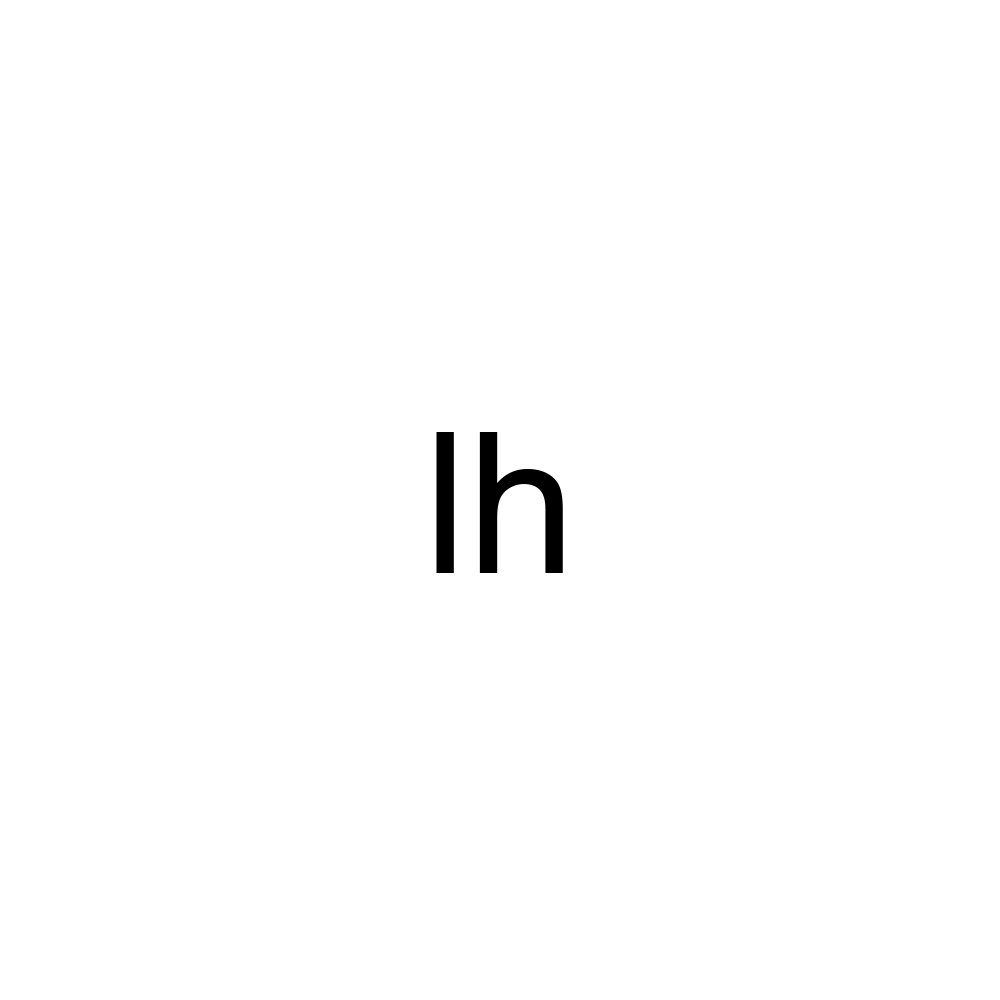
<style>
.page{position:relative;width:1000px;height:1000px;background:#ffffff}
.page>*{position:absolute;margin:0}
.t1{font:195.8px "ArialMT";color:#000000}
</style>
<div class="page">
<p class="t1" style="left:436px;top:432px;width:127px;height:141px">lh</p>
</div>
